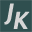
<style>
.page{position:relative;width:32px;height:32px;background:#2f4f4f}
.page>*{position:absolute;margin:0}
.t1{font:25px/8.3px "QuattrocentoSans-Bold";color:#d6d6d6;font-weight:bold;font-style:italic}
</style>
<div class="page">
<p class="t1" style="left:4px;top:3px;width:26px;height:26px;text-align:center">J<br>   K</p>
</div>
